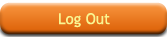
<style>
.page{position:relative;width:167px;height:37px}
.page>*{position:absolute;margin:0}
.t1{font:15px "TrebuchetMS";color:#f9f592}
</style>
<div class="page">
<p class="t1" style="left:59px;top:13px;width:51px;height:15px">Log Out</p>
</div>
